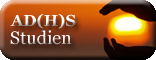
<style>
.page{position:relative;width:156px;height:60px}
.page>*{position:absolute;margin:0}
.t1{font:16px "Georgia-Bold"}
.t2{font:18px "Georgia";color:#ffffff}
</style>
<div class="page">
<p class="t1" style="left:10px;top:14px;width:66px;height:15px">AD(H)S</p>
<p class="t2" style="left:10px;top:30px;width:62px;height:15px">Studien</p>
</div>
